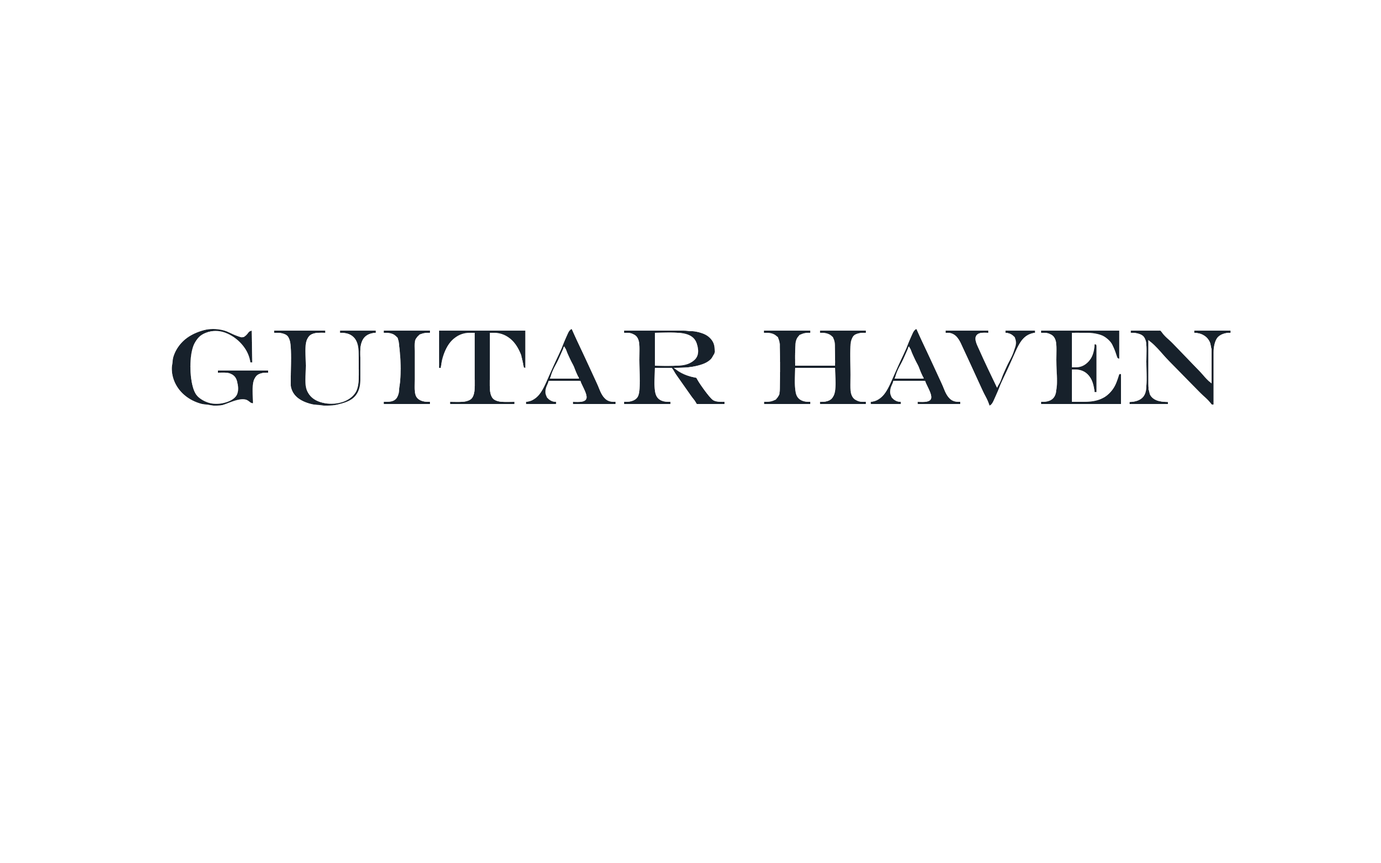
<style>
.page{position:relative;width:1381px;height:863px;background:#ffffff}
.page>*{position:absolute;margin:0}
.t1{font:107.9px "EngraversMT";color:#17212b}
</style>
<div class="page">
<p class="t1" style="left:172px;top:329px;width:1059px;height:77px">Guitar Haven</p>
</div>
